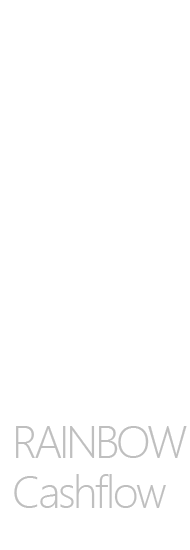
<style>
.page{position:relative;width:190px;height:550px;background:#ffffff}
.page>*{position:absolute;margin:0}
.t1{font:41.7px/50px "MicrosoftYaHeiUILight";letter-spacing:-0.05em;color:#bfbfbf}
.t2{font:41.7px/50px "MicrosoftYaHeiUILight";letter-spacing:-0.075em;color:#bfbfbf}
</style>
<div class="page">
<p class="t1" style="left:14px;top:426px;width:173px;height:82px"><span class="t2">RAINBOW<br></span>Cashflow</p>
</div>
